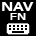
<style>
.page{position:relative;width:36px;height:36px;background:#000000}
.page>*{position:absolute;margin:0}
.t1{font:13px "Swiss721BT-BoldExtended";color:#ffffff}
.t2{font:10px "Swiss721BT-BoldExtended";color:#ffffff}
</style>
<div class="page">
<p class="t1" style="left:2px;top:2px;width:32px;height:9px">NAV</p>
<p class="t2" style="left:10px;top:13px;width:16px;height:7px">FN</p>
</div>
